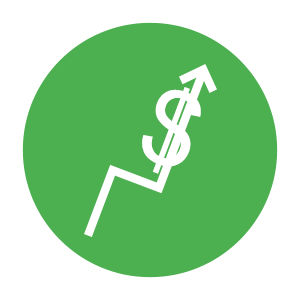
<style>
.page{position:relative;width:300px;height:300px;background:#4caf50}
.page>*{position:absolute;margin:0}
.t1{font:102px "ArialMT";color:#ffffff}
</style>
<div class="page">
<p class="t1" style="left:142px;top:87px;width:59px;height:87px;rotate:21deg">$</p>
</div>
